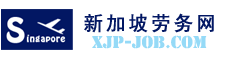
<style>
.page{position:relative;width:230px;height:62px;background:#ffffff}
.page>*{position:absolute;margin:0}
.t1{font:20px "SimHei";letter-spacing:0.1em;color:#021763;font-weight:bold}
.t2{font:16px "StencilStd";color:#95daf7}
</style>
<div class="page">
<p class="t1" style="left:84px;top:13px;width:130px;height:20px">新加坡劳务网</p>
<p class="t2" style="left:92px;top:35px;width:115px;height:14px">xjp-job.com</p>
</div>
